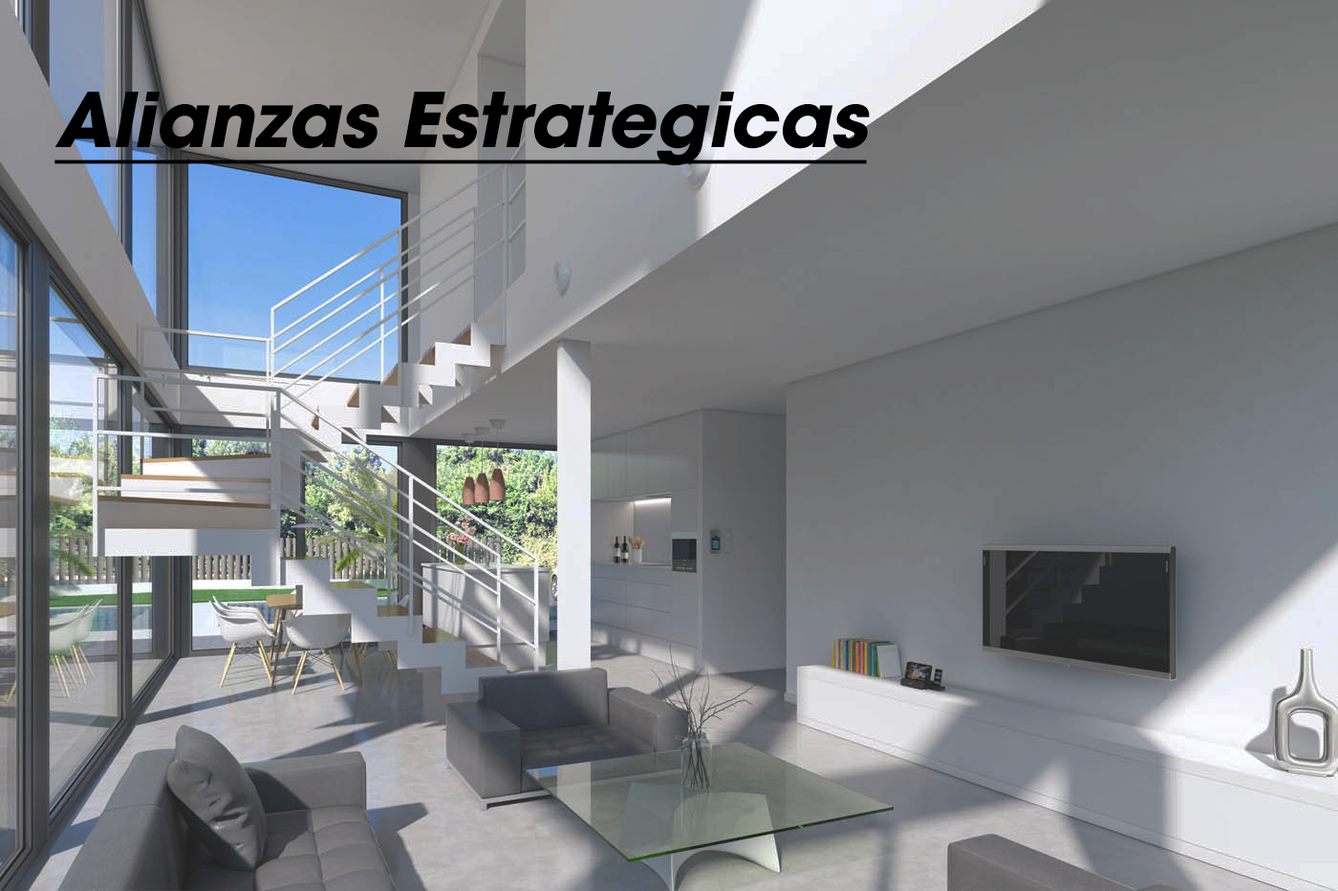
<style>
.page{position:relative;width:1338px;height:891px}
.page>*{position:absolute;margin:0}
.t1{font:74.5px "ITCAvantGardePro-BoldObl";color:#000000;text-decoration:underline}
</style>
<div class="page">
<p class="t1" style="left:54px;top:92px;width:815px;height:74px">Alianzas Estrategicas</p>
</div>
